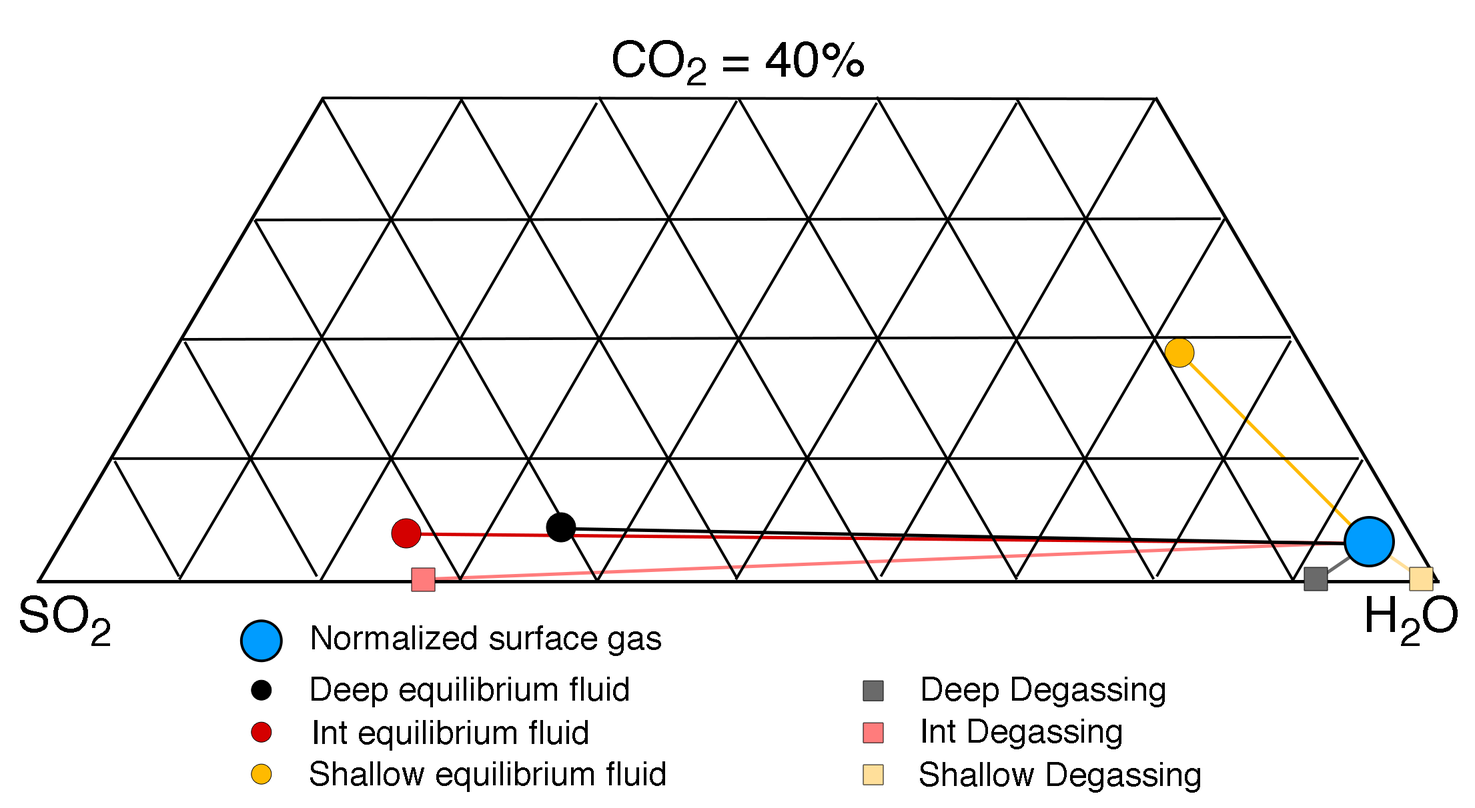
<style>
.page{position:relative;width:1475px;height:808px;background:#ffffff}
.page>*{position:absolute;margin:0}
.t1{font:50px "Helvetica";color:#000000}
.t2{font:38.9px "Helvetica";color:#000000}
.t3{font:33.4px "Helvetica";color:#000000}
</style>
<div class="page">
<p class="t1" style="left:613px;top:40px;width:251px;height:45px">CO<span class="t2">2</span> = 40%</p>
<p class="t1" style="left:20px;top:596px;width:90px;height:50px">SO<span class="t2">2</span></p>
<p class="t1" style="left:1367px;top:596px;width:91px;height:50px">H<span class="t2">2</span>O</p>
<p class="t3" style="left:312px;top:626px;width:349px;height:30px">Normalized surface gas</p>
<p class="t3" style="left:312px;top:677px;width:316px;height:31px">Deep equilibrium fluid</p>
<p class="t3" style="left:923px;top:677px;width:242px;height:31px">Deep Degassing</p>
<p class="t3" style="left:314px;top:720px;width:274px;height:31px">Int equilibrium fluid</p>
<p class="t3" style="left:923px;top:719px;width:198px;height:31px">Int Degassing</p>
<p class="t3" style="left:310px;top:761px;width:355px;height:31px">Shallow equilibrium fluid</p>
<p class="t3" style="left:920px;top:762px;width:280px;height:31px">Shallow Degassing</p>
</div>
